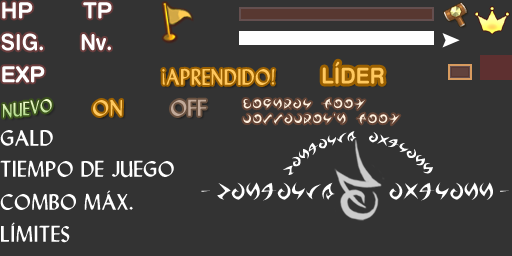
<style>
.page{position:relative;width:512px;height:256px;background:#333333}
.page>*{position:absolute;margin:0}
.t1{font:22px "Swiss721BT-BoldRounded";color:#ffffff;scale:0.97 1}
.t2{font:22px "Swiss721BT-BoldRounded";color:#ffc85e;scale:0.97 1}
.t3{font:24px "Lydian";color:#ffc85e;scale:0.92 1}
.t4{font:20.4px "Lydian";scale:0.88 1}
.t5{font:24px "Lydian";color:#ffc85e}
.t6{font:24px "Lydian";color:#c1a999}
.t7{font:24px "Lydian";color:#ffffff}
</style>
<div class="page">
<p class="t1" style="left:1px;top:33px;width:42px;height:18px">SIG.</p>
<p class="t1" style="left:81px;top:34px;width:30px;height:17px">Nv.</p>
<p class="t2" style="left:322px;top:61px;width:62px;height:23px">LÍDER</p>
<p class="t3" style="left:162px;top:68px;width:113px;height:17px">¡APRENDIDO!</p>
<p class="t4" style="left:2px;top:99px;width:50px;height:19px">NUEVO</p>
<p class="t5" style="left:93px;top:99px;width:29px;height:17px">ON</p>
<p class="t6" style="left:171px;top:99px;width:36px;height:17px">OFF</p>
<p class="t7" style="left:0px;top:130px;width:53px;height:16px">GALD</p>
<p class="t7" style="left:0px;top:160px;width:174px;height:18px">TIEMPO DE JUEGO</p>
<p class="t7" style="left:0px;top:190px;width:133px;height:20px">COMBO MÁX.</p>
<p class="t7" style="left:1px;top:222px;width:69px;height:21px">LÍMITES</p>
</div>
